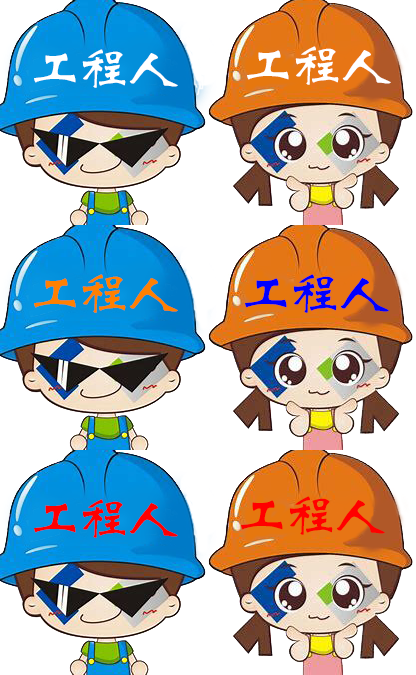
<style>
.page{position:relative;width:416px;height:675px;background:#ffffff}
.page>*{position:absolute;margin:0}
.t1{font:48px "HGWT_CNKI";color:#ffffff}
.t2{font:48px "HGWT_CNKI";color:#ff8000}
.t3{font:48px "HGWT_CNKI";color:#0000ff}
.t4{font:48px "HGWT_CNKI";color:#ff0000}
</style>
<div class="page">
<p class="t1" style="left:34px;top:49px;width:144px;height:39px">工程人</p>
<p class="t1" style="left:247px;top:46px;width:144px;height:39px">工程人</p>
<p class="t2" style="left:34px;top:274px;width:144px;height:39px">工程人</p>
<p class="t3" style="left:245px;top:274px;width:144px;height:39px">工程人</p>
<p class="t4" style="left:241px;top:496px;width:144px;height:39px">工程人</p>
<p class="t4" style="left:34px;top:499px;width:144px;height:39px">工程人</p>
</div>
